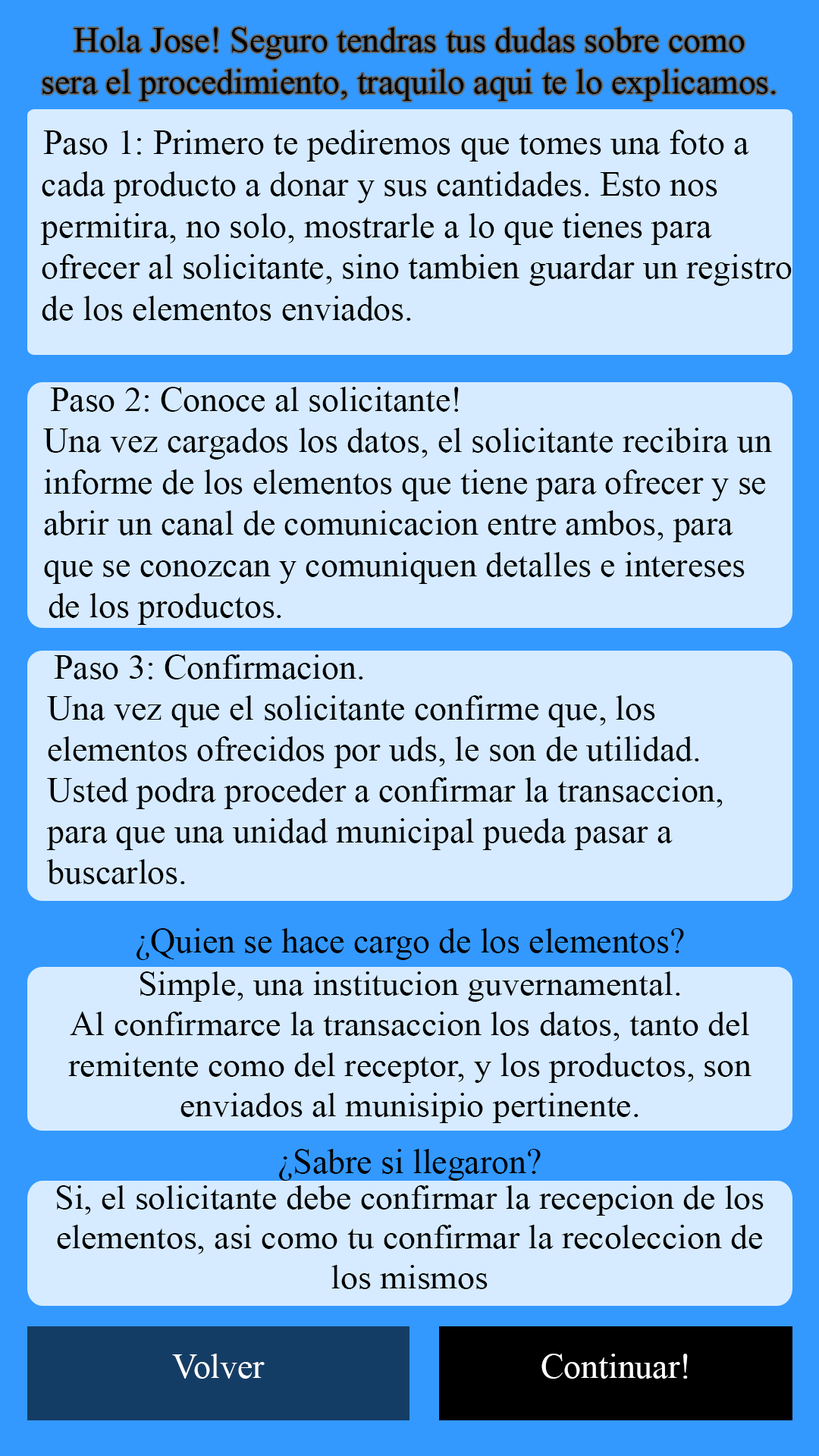
<style>
.page{position:relative;width:819px;height:1456px;background:#d6ebff}
.page>*{position:absolute;margin:0}
.t1{font:34.7px "TimesNewRomanPSMT";color:#000000}
.t2{font:34.4px "TimesNewRomanPSMT";color:#000000}
.t3{font:34.1px "TimesNewRomanPSMT";color:#000000}
.t4{font:33.7px "TimesNewRomanPSMT";color:#000000}
.t5{font:33.4px "TimesNewRomanPSMT";color:#000000;scale:1.04 1}
.t6{font:34.7px "TimesNewRomanPSMT";color:#ffffff}
</style>
<div class="page">
<p class="t1" style="left:42px;top:27px;width:734px;height:74px;text-align:center">Hola Jose! Seguro tendras tus dudas sobre como <br>sera el procedimiento, traquilo aqui te lo explicamos.</p>
<p class="t1" style="left:40px;top:130px;width:752px;height:191px">Paso 1: Primero te pediremos que tomes una foto a cada producto a donar y sus cantidades. Esto nos permitira, no solo, mostrarle a lo que tienes para ofrecer al solicitante, sino tambien guardar un registro de los elementos enviados.</p>
<p class="t2" style="left:43px;top:387px;width:729px;height:238px">Paso 2: Conoce al solicitante!<br>Una vez cargados los datos, el solicitante recibira un informe de los elementos que tiene para ofrecer y se abrir un canal de comunicacion entre ambos, para que se conozcan y comuniquen detalles e intereses de los productos.</p>
<p class="t3" style="left:46px;top:654px;width:677px;height:230px">Paso 3: Confirmacion.<br>Una vez que el solicitante confirme que, los elementos ofrecidos por uds, le son de utilidad. Usted podra proceder a confirmar la transaccion, para que una unidad municipal pueda pasar a buscarlos.</p>
<p class="t1" style="left:136px;top:928px;width:548px;height:32px">¿Quien se hace cargo de los elementos?</p>
<p class="t4" style="left:68px;top:971px;width:683px;height:152px;text-align:center">Simple, una institucion guvernamental.<br>Al confirmarce la transaccion los datos, tanto del remitente como del receptor, y los productos, son enviados al munisipio pertinente.</p>
<p class="t1" style="left:279px;top:1149px;width:262px;height:32px">¿Sabre si llegaron?</p>
<p class="t5" style="left:56px;top:1185px;width:708px;height:104px;text-align:center">Si, el solicitante debe confirmar la recepcion de los elementos, asi como tu confirmar la recoleccion de los mismos</p>
<p class="t6" style="left:172px;top:1354px;width:93px;height:25px">Volver</p>
<p class="t6" style="left:541px;top:1354px;width:147px;height:25px">Continuar!</p>
</div>
